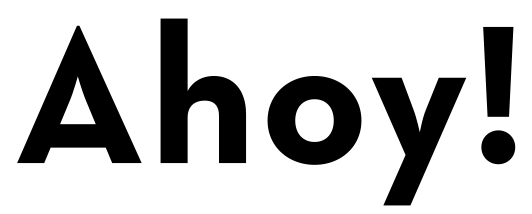
<style>
.page{position:relative;width:532px;height:214px;background:#ffffff}
.page>*{position:absolute;margin:0}
.t1{font:200px "NeutraTextTF-BoldAlt";letter-spacing:0.02em;color:#000000}
</style>
<div class="page">
<p class="t1" style="left:17px;top:18px;width:499px;height:188px">Ahoy!</p>
</div>
